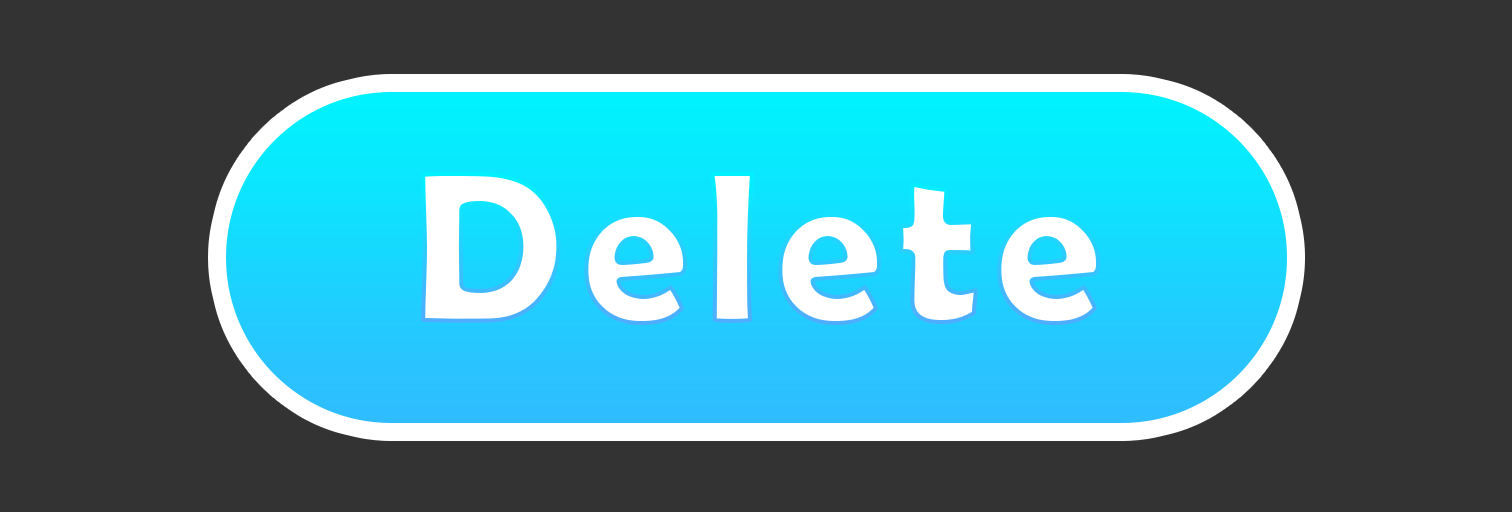
<style>
.page{position:relative;width:1512px;height:512px;background:#333333}
.page>*{position:absolute;margin:0}
.t1{font:218.9px "BerlinSansFBDemi-Bold";letter-spacing:0.06em;color:#ffffff}
</style>
<div class="page">
<p class="t1" style="left:421px;top:172px;width:680px;height:153px">Delete</p>
</div>
